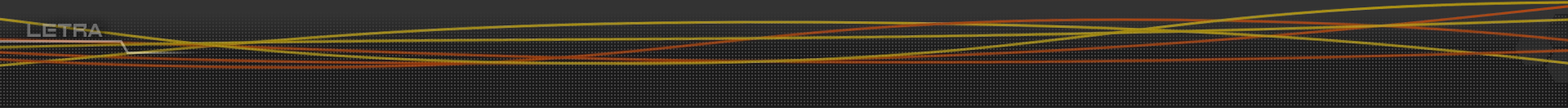
<style>
.page{position:relative;width:1568px;height:108px}
.page>*{position:absolute;margin:0}
.t1{font:19.6px "FOTBullheaded";letter-spacing:-0.015em;color:#6c6c6c}
</style>
<div class="page">
<p class="t1" style="left:27px;top:24px;width:76px;height:13px">LETRA</p>
</div>
